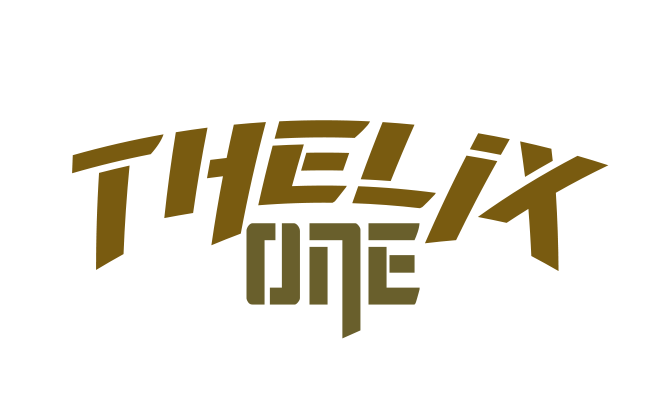
<style>
.page{position:relative;width:652px;height:396px;background:#ffffff}
.page>*{position:absolute;margin:0}
.t1{font:126.8px "DeceptibotsExpandedItalic";color:#795b10}
.t2{font:124.6px "DeceptibotsCondensed";color:#695f2c}
</style>
<div class="page">
<p class="t1" style="left:72px;top:120px;width:537px;height:151px">THELIX</p>
<p class="t2" style="left:246px;top:223px;width:174px;height:116px">ONE</p>
</div>
